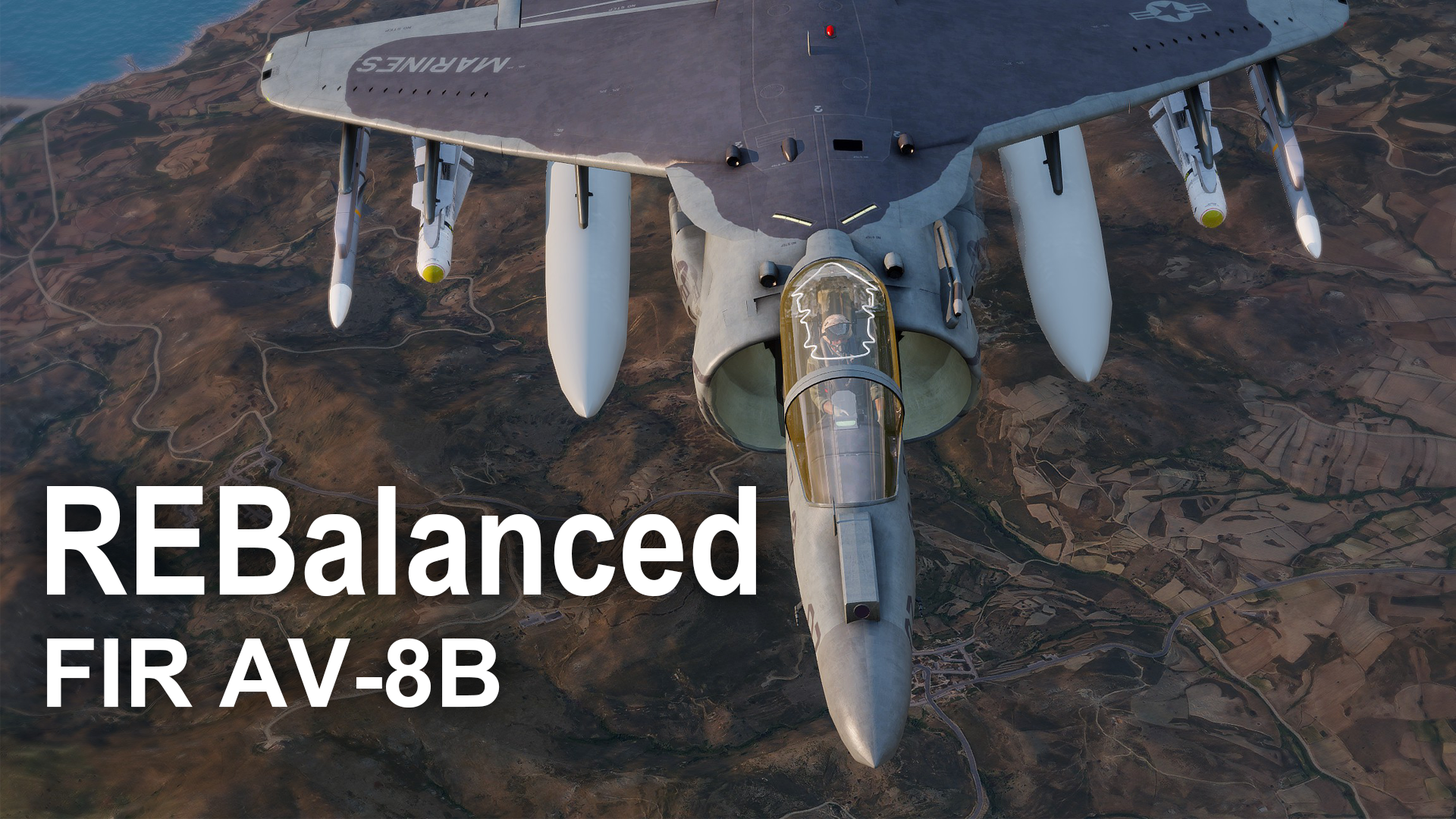
<style>
.page{position:relative;width:1456px;height:819px}
.page>*{position:absolute;margin:0}
.t1{font:151.7px "ArialNarrow-Bold";color:#ffffff}
.t2{font:94.8px "Arial-BoldMT";color:#ffffff}
</style>
<div class="page">
<p class="t1" style="left:47px;top:486px;width:709px;height:110px">REBalanced</p>
<p class="t2" style="left:47px;top:639px;width:453px;height:69px">FIR AV-8B</p>
</div>
